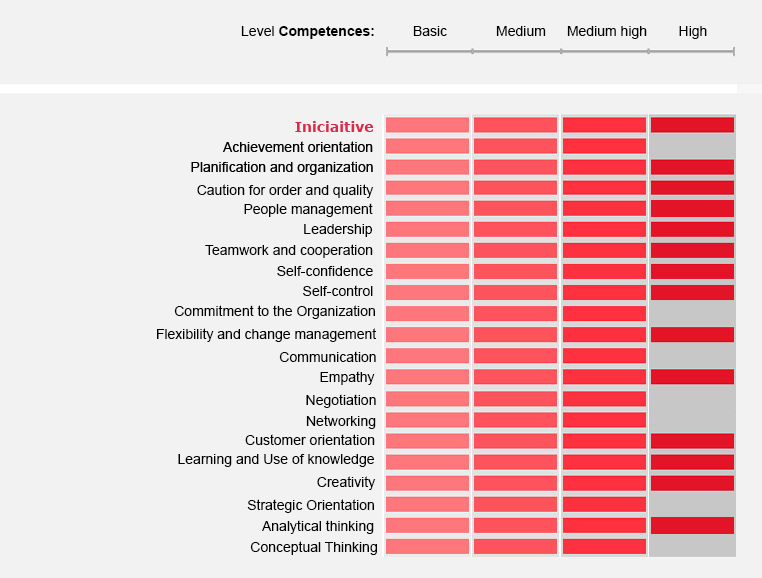
<style>
.page{position:relative;width:762px;height:578px;background:#f2f2f2}
.page>*{position:absolute;margin:0}
.t1{font:14px "Arial-BoldMT";color:#000000}
.t2{font:14px "ArialMT";color:#000000}
</style>
<div class="page">
<p class="t1" style="left:241px;top:26px;width:133px;height:13px"><span class="t2">Level </span>Competences:</p>
<p class="t2" style="left:413px;top:26px;width:34px;height:10px">Basic</p>
<p class="t2" style="left:496px;top:26px;width:50px;height:10px">Medium</p>
<p class="t2" style="left:567px;top:26px;width:80px;height:13px">Medium high</p>
<p class="t2" style="left:679px;top:26px;width:28px;height:13px">High</p>
<p class="t2" style="left:197px;top:184px;width:177px;height:14px">Caution for order and quality</p>
<p class="t2" style="left:244px;top:203px;width:129px;height:14px">People management</p>
<p class="t2" style="left:304px;top:224px;width:69px;height:13px">Leadership</p>
<p class="t2" style="left:205px;top:244px;width:168px;height:14px">Teamwork and cooperation</p>
<p class="t2" style="left:277px;top:266px;width:96px;height:10px">Self-confidence</p>
<p class="t2" style="left:303px;top:285px;width:70px;height:11px">Self-control</p>
<p class="t2" style="left:174px;top:305px;width:201px;height:14px">Commitment to the Organization</p>
<p class="t2" style="left:157px;top:328px;width:220px;height:14px">Flexibility and change management</p>
<p class="t2" style="left:279px;top:351px;width:97px;height:11px">Communication</p>
<p class="t2" style="left:320px;top:371px;width:55px;height:14px">Empathy</p>
<p class="t2" style="left:306px;top:394px;width:70px;height:14px">Negotiation</p>
<p class="t2" style="left:306px;top:415px;width:70px;height:14px">Networking</p>
<p class="t2" style="left:245px;top:434px;width:130px;height:11px">Customer orientation</p>
<p class="t2" style="left:178px;top:454px;width:196px;height:13px">Learning and Use of knowledge</p>
<p class="t2" style="left:317px;top:476px;width:59px;height:14px">Creativity</p>
<p class="t2" style="left:247px;top:499px;width:127px;height:14px">Strategic Orientation</p>
<p class="t2" style="left:262px;top:520px;width:112px;height:14px">Analytical thinking</p>
<p class="t2" style="left:250px;top:541px;width:127px;height:14px">Conceptual Thinking</p>
</div>
